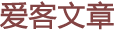
<style>
.page{position:relative;width:115px;height:30px;background:#ffffff}
.page>*{position:absolute;margin:0}
.t1{font:28px "MicrosoftYaHei";color:#834343;font-weight:bold}
</style>
<div class="page">
<p class="t1" style="left:0px;top:1px;width:114px;height:29px">爱客文章</p>
</div>
